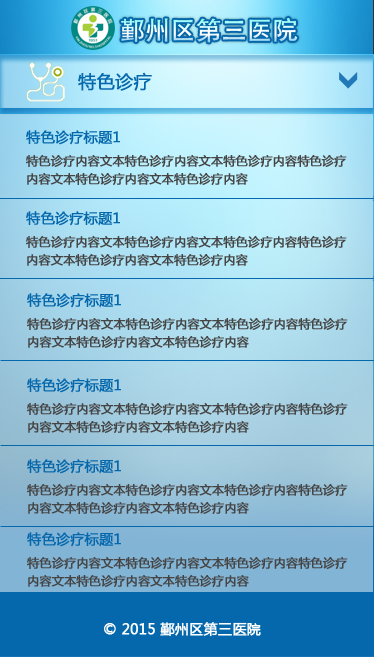
<style>
.page{position:relative;width:374px;height:663px}
.page>*{position:absolute;margin:0}
.t1{font:18px "MicrosoftYaHei";color:#0568ac;font-weight:bold}
.t2{font:12px/18px "MicrosoftYaHei";color:#454545;font-weight:bold}
.t3{font:14px "MicrosoftYaHei";color:#0568ac;font-weight:bold}
.t4{font:14px "MicrosoftYaHei";color:#ffffff;font-weight:bold}
</style>
<div class="page">
<p class="t1" style="left:78px;top:72px;width:74px;height:19px">特色诊疗</p>
<p class="t2" style="left:26px;top:130px;width:321px;height:55px"><span class="t3">特色诊疗标题1<br></span>特色诊疗内容文本特色诊疗内容文本特色诊疗内容特色诊疗<br>内容文本特色诊疗内容文本特色诊疗内容</p>
<p class="t2" style="left:26px;top:211px;width:321px;height:55px"><span class="t3">特色诊疗标题1<br></span>特色诊疗内容文本特色诊疗内容文本特色诊疗内容特色诊疗<br>内容文本特色诊疗内容文本特色诊疗内容</p>
<p class="t2" style="left:27px;top:293px;width:321px;height:55px"><span class="t3">特色诊疗标题1<br></span>特色诊疗内容文本特色诊疗内容文本特色诊疗内容特色诊疗<br>内容文本特色诊疗内容文本特色诊疗内容</p>
<p class="t2" style="left:27px;top:378px;width:321px;height:55px"><span class="t3">特色诊疗标题1<br></span>特色诊疗内容文本特色诊疗内容文本特色诊疗内容特色诊疗<br>内容文本特色诊疗内容文本特色诊疗内容</p>
<p class="t2" style="left:27px;top:459px;width:321px;height:55px"><span class="t3">特色诊疗标题1<br></span>特色诊疗内容文本特色诊疗内容文本特色诊疗内容特色诊疗<br>内容文本特色诊疗内容文本特色诊疗内容</p>
<p class="t2" style="left:27px;top:532px;width:321px;height:55px"><span class="t3">特色诊疗标题1<br></span>特色诊疗内容文本特色诊疗内容文本特色诊疗内容特色诊疗<br>内容文本特色诊疗内容文本特色诊疗内容</p>
<p class="t4" style="left:104px;top:622px;width:157px;height:15px">© 2015 鄞州区第三医院</p>
</div>
